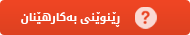
<style>
.page{position:relative;width:190px;height:35px}
.page>*{position:absolute;margin:0}
.t1{font:11px "DroidArabicKufi-Bold";color:#ffffff}
</style>
<div class="page">
<p class="t1" style="left:21px;top:12px;width:99px;height:15px">ڕێنوێنی بەکارهێنان</p>
</div>
